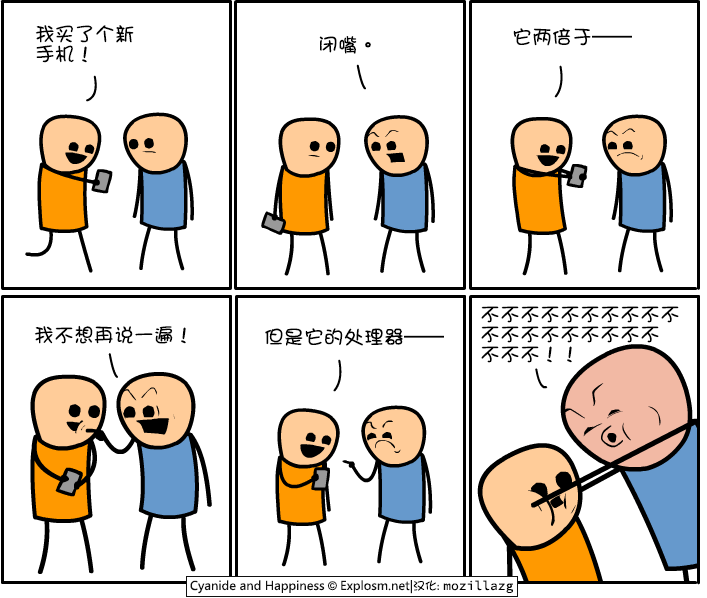
<style>
.page{position:relative;width:707px;height:598px;background:#ffffff}
.page>*{position:absolute;margin:0}
.t1{font:20px/20px "DFGirl";color:#000000}
.t2{font:20px "DFGirl";color:#000000}
</style>
<div class="page">
<p class="t1" style="left:35px;top:25px;width:99px;height:38px">我买了个新<br>手机！</p>
<p class="t2" style="left:513px;top:28px;width:119px;height:18px">它两倍于——</p>
<p class="t2" style="left:319px;top:36px;width:52px;height:18px">闭嘴。</p>
<p class="t1" style="left:481px;top:306px;width:198px;height:57px">不不不不不不不不不不<br>不不不不不不不不不<br>不不不！！</p>
<p class="t2" style="left:34px;top:325px;width:152px;height:19px">我不想再说一遍！</p>
<p class="t2" style="left:265px;top:328px;width:179px;height:18px">但是它的处理器——</p>
</div>
